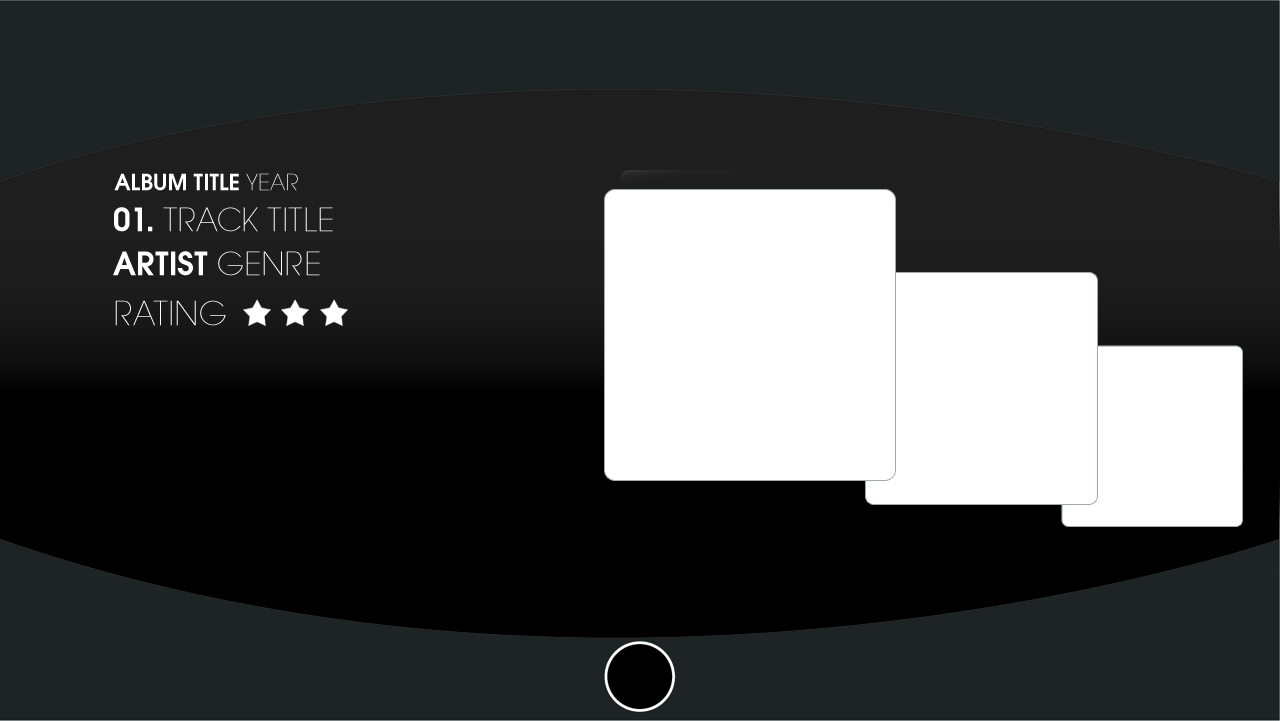
<style>
.page{position:relative;width:1280px;height:721px;background:#1e2425}
.page>*{position:absolute;margin:0}
.t1{font:24px "AvantGardeITCTTDemi";color:#ffffff}
.t2{font:24px "AvantGardeExtLitITCTT";color:#ffffff}
.t3{font:35px "AvantGardeExtLitITCTT";color:#ffffff}
.t4{font:35px "AvantGardeITCTTDemi";color:#ffffff}
.t5{font:36px "AvantGardeExtLitITCTT";color:#ffffff}
</style>
<div class="page">
<p class="t1" style="left:114px;top:173px;width:184px;height:18px">ALBUM TITLE <span class="t2">YEAR</span></p>
<p class="t3" style="left:114px;top:207px;width:219px;height:25px"><span class="t4">01.</span> TRACK TITLE</p>
<p class="t4" style="left:113px;top:251px;width:207px;height:25px">ARTIST <span class="t3">GENRE</span></p>
<p class="t5" style="left:115px;top:300px;width:111px;height:26px">RATING</p>
</div>
